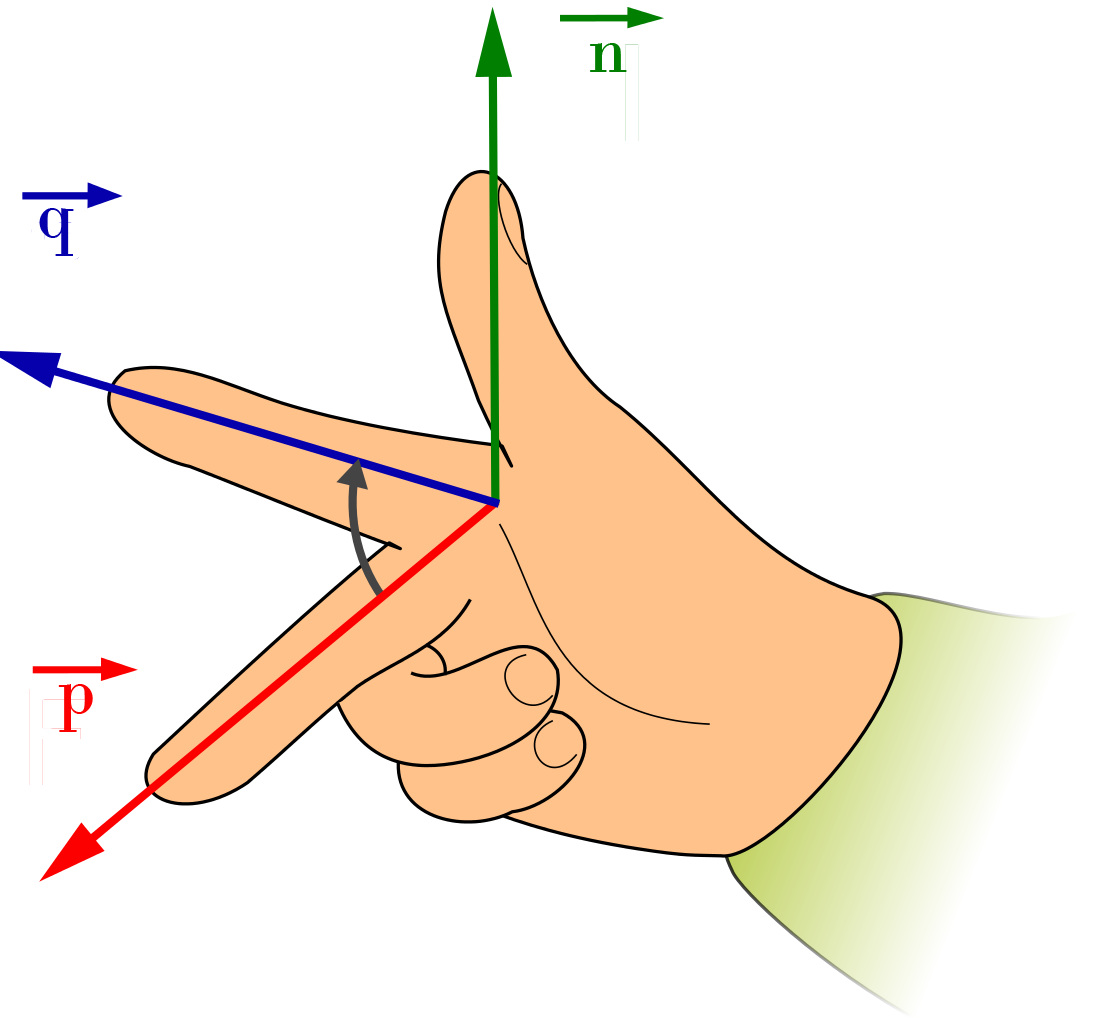
<style>
.page{position:relative;width:1106px;height:1024px;background:#ffffff}
.page>*{position:absolute;margin:0}
.t1{font:72px "BodoniMT";color:#007f00}
.t2{font:72px "BodoniMT";color:#0500ab}
.t3{font:72px "BodoniMT";color:#fc0000}
</style>
<div class="page">
<p class="t1" style="left:590px;top:43px;width:37px;height:29px">n</p>
<p class="t2" style="left:39px;top:208px;width:35px;height:48px">q</p>
<p class="t3" style="left:58px;top:684px;width:35px;height:48px">p</p>
</div>
